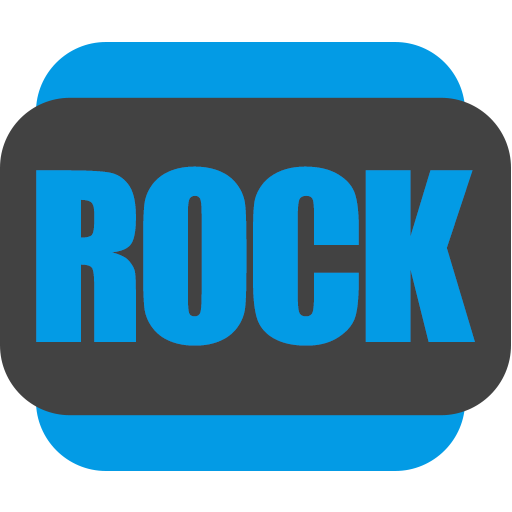
<style>
.page{position:relative;width:512px;height:512px;background:#039be5}
.page>*{position:absolute;margin:0}
.t1{font:217px "Impact";letter-spacing:-0.04em;color:#039be5}
</style>
<div class="page">
<p class="t1" style="left:36px;top:166px;width:439px;height:180px">ROCK</p>
</div>
